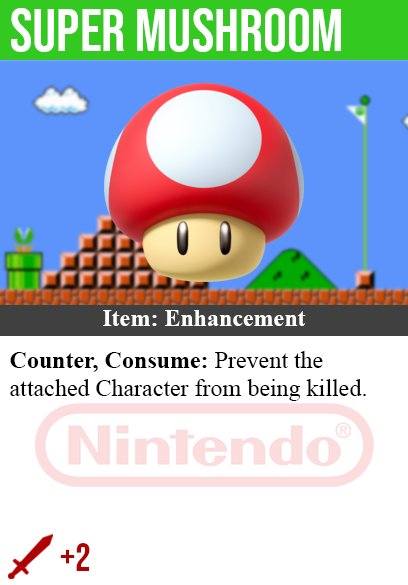
<style>
.page{position:relative;width:408px;height:585px;background:#ffffff}
.page>*{position:absolute;margin:0}
.t1{font:60px "BebasNeue-Regular";color:#ffffff}
.t2{font:24px "TimesNewRomanPS-BoldMT";color:#ffffff}
.t3{font:24px "TimesNewRomanPSMT";color:#000000}
.t4{font:24px "TimesNewRomanPS-BoldMT";color:#000000}
.t5{font:40px "BebasNeue-Regular";color:#af0202}
</style>
<div class="page">
<p class="t1" style="left:11px;top:8px;width:330px;height:44px">super mushroom</p>
<p class="t2" style="left:103px;top:310px;width:203px;height:16px">Item: Enhancement</p>
<p class="t3" style="left:10px;top:351px;width:356px;height:50px"><span class="t4">Counter, Consume:</span> Prevent the<br>attached Character from being killed.</p>
<p class="t5" style="left:60px;top:543px;width:30px;height:28px">+2</p>
</div>
